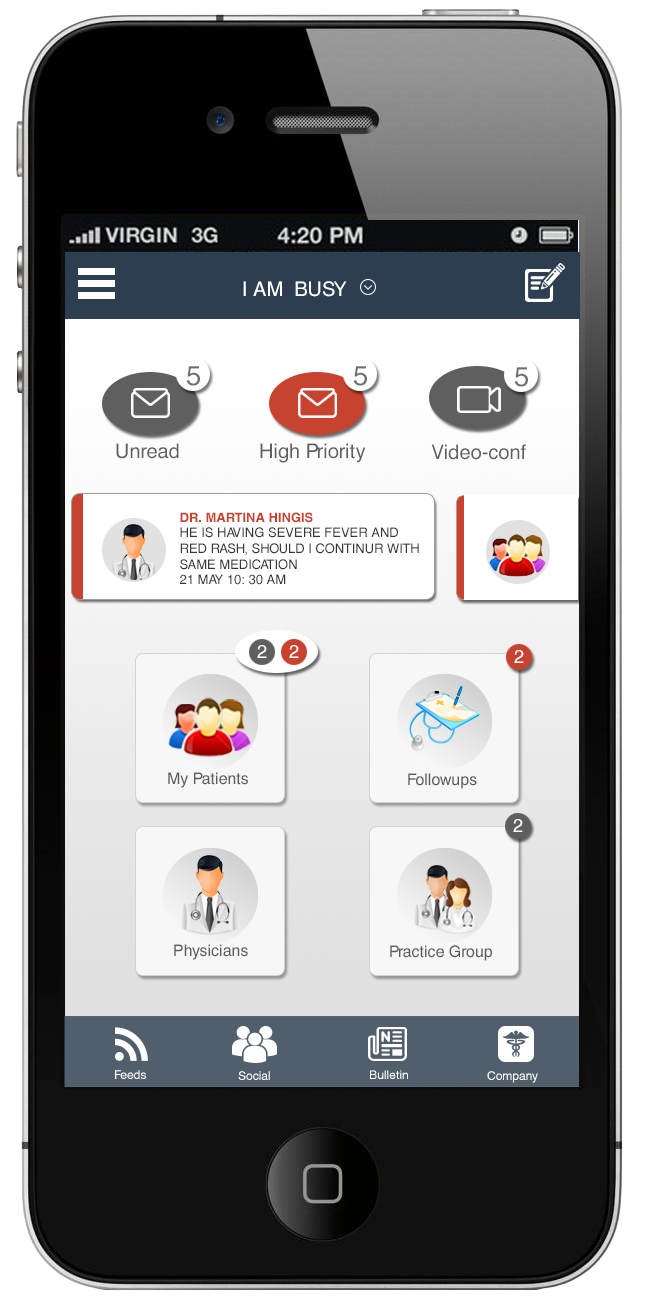
<style>
.page{position:relative;width:648px;height:1300px}
.page>*{position:absolute;margin:0}
.t1{font:20px "HelveticaCE-Regular";color:#ffffff;text-transform:uppercase}
.t2{font:27.2px "HelveticaLT";color:#6e6e6e}
.t3{font:20px "HelveticaCE-Regular";color:#5f5f5f}
.t4{font:13px "HelveticaCE-Regular";color:#363636;text-transform:uppercase}
.t5{font:13px "HelveticaCE-Bold";color:#c7422f;text-transform:uppercase}
.t6{font:18.5px "HelveticaLT";color:#ffffff}
.t7{font:16px "HelveticaCE-Regular";color:#5b5b5b}
.t8{font:12px "HelveticaCE-Regular";color:#ffffff}
.t9{font:12px "HelveticaNeueCE-Roman";color:#ffffff}
</style>
<div class="page">
<p class="t1" style="left:243px;top:281px;width:104px;height:16px">I am  busy</p>
<p class="t2" style="left:186px;top:366px;width:14px;height:20px">5</p>
<p class="t2" style="left:353px;top:366px;width:14px;height:20px">5</p>
<p class="t2" style="left:514px;top:367px;width:14px;height:20px">5</p>
<p class="t3" style="left:116px;top:443px;width:63px;height:16px">Unread</p>
<p class="t3" style="left:260px;top:443px;width:106px;height:20px">High Priority</p>
<p class="t3" style="left:431px;top:444px;width:95px;height:16px">Video-conf</p>
<p class="t4" style="left:180px;top:512px;width:239px;height:73px"><span class="t5">Dr. Martina Hingis<br></span>He is having severe fever and red rash, Should I continur with same medication<br>21 May 10: 30 am</p>
<p class="t6" style="left:257px;top:645px;width:10px;height:13px">2</p>
<p class="t6" style="left:289px;top:645px;width:10px;height:13px">2</p>
<p class="t6" style="left:514px;top:650px;width:10px;height:13px">2</p>
<p class="t7" style="left:168px;top:772px;width:80px;height:16px">My Patients</p>
<p class="t7" style="left:408px;top:773px;width:69px;height:16px">Followups</p>
<p class="t6" style="left:513px;top:819px;width:10px;height:13px">2</p>
<p class="t7" style="left:174px;top:944px;width:74px;height:16px">Physicians</p>
<p class="t7" style="left:390px;top:945px;width:102px;height:16px">Practice Group</p>
<p class="t8" style="left:115px;top:1070px;width:31px;height:9px">Feeds</p>
<p class="t8" style="left:238px;top:1071px;width:32px;height:9px">Social</p>
<p class="t9" style="left:370px;top:1070px;width:38px;height:9px">Bulletin</p>
<p class="t8" style="left:487px;top:1071px;width:51px;height:12px">Company</p>
</div>
